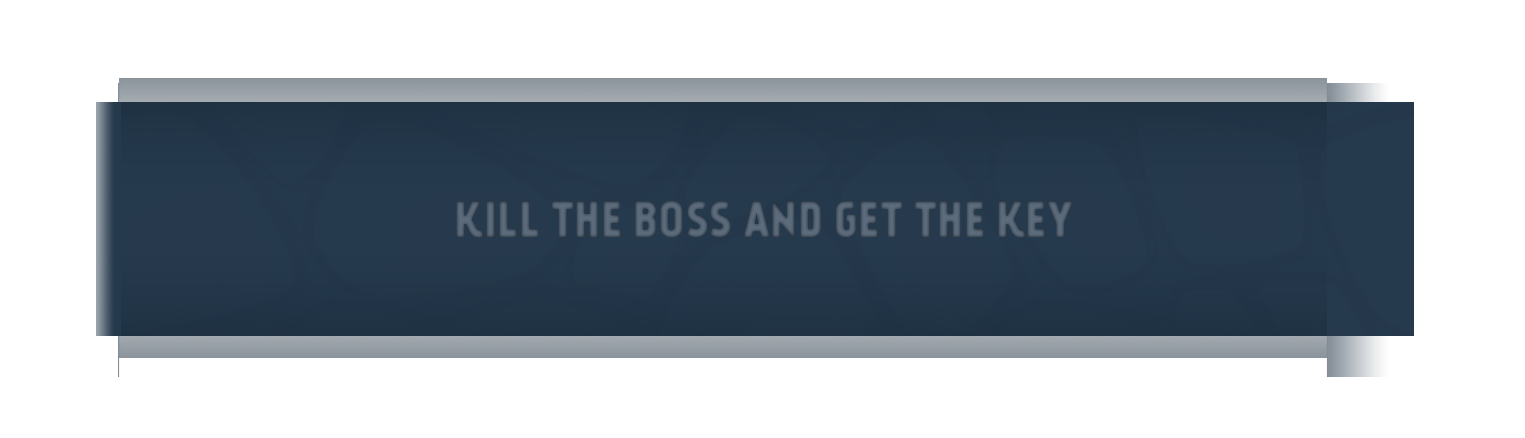
<style>
.page{position:relative;width:1525px;height:438px;background:#ffffff}
.page>*{position:absolute;margin:0}
.t1{font:48.2px "Kankin";letter-spacing:0.01em;color:#5c6c7d}
</style>
<div class="page">
<p class="t1" style="left:456px;top:201px;width:617px;height:37px">KILL THE BOSS AND GET THE KEY</p>
</div>
